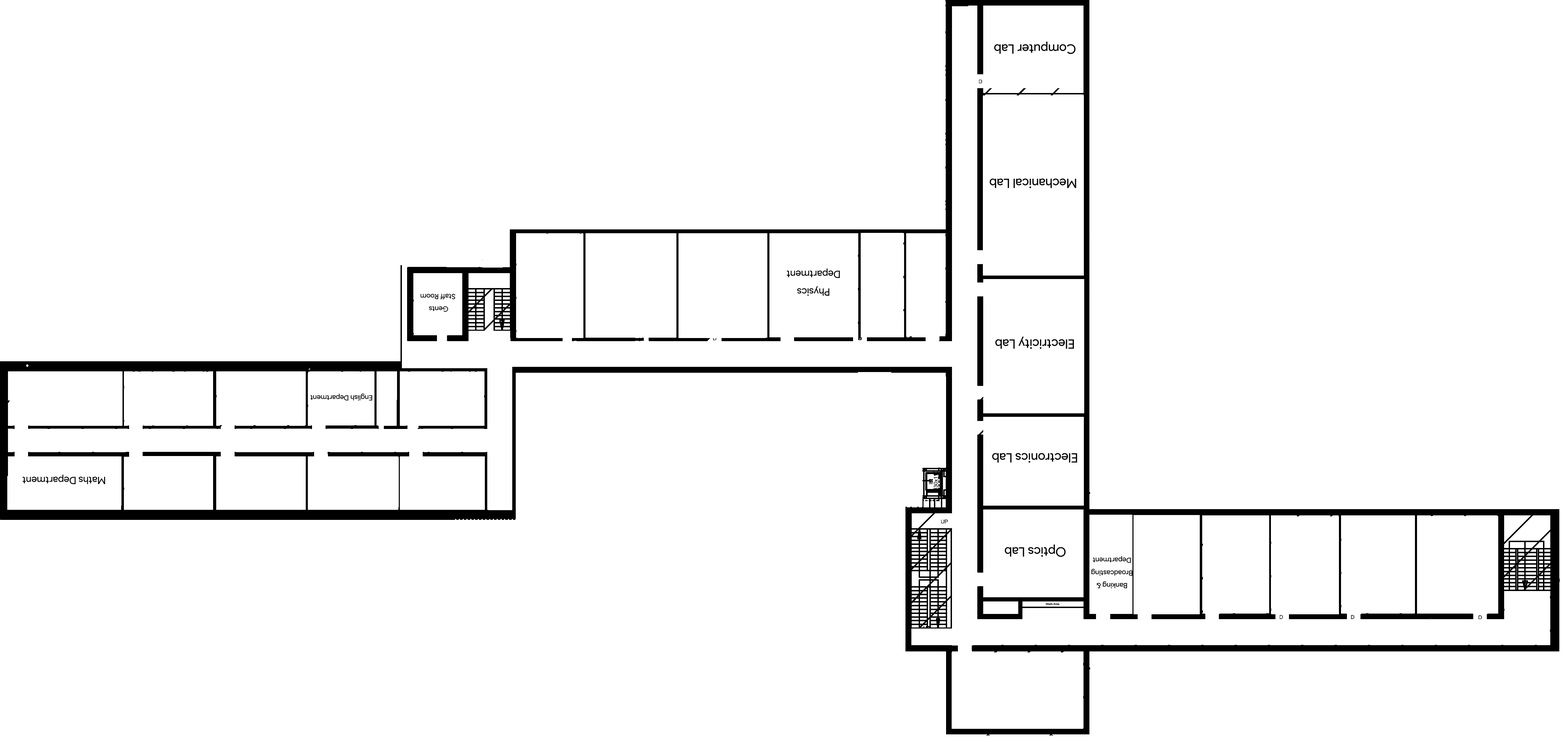
<style>
.page{position:relative;width:1568px;height:742px;background:#ffffff}
.page>*{position:absolute;margin:0}
.t1{font:13px "ProductSans-Regular";color:#000000}
.t2{font:10.1px "ProductSans-Regular";color:#000000}
.t3{font:7.2px "ProductSans-Regular";color:#000000}
.t4{font:2.9px "ProductSans-Regular";color:#000000}
</style>
<div class="page">
<p class="t1" style="left:994px;top:42px;width:82px;height:12px;rotate:180deg">Computer Lab</p>
<p class="t1" style="left:989px;top:178px;width:87px;height:10px;rotate:180deg">Mechanical Lab</p>
<p class="t2" style="left:787px;top:268px;width:53px;height:28px;text-align:center;rotate:-180deg">Physics<br>Department</p>
<p class="t3" style="left:420px;top:294px;width:35px;height:18px;text-align:center;rotate:180deg">Gents <br>Staff Room</p>
<p class="t1" style="left:995px;top:337px;width:79px;height:12px;rotate:-180deg">Electricity Lab</p>
<p class="t3" style="left:310px;top:394px;width:62px;height:7px;rotate:180deg">English Department</p>
<p class="t1" style="left:992px;top:453px;width:85px;height:10px;rotate:180deg">Electronics Lab</p>
<p class="t2" style="left:23px;top:474px;width:82px;height:10px;rotate:-180deg">Maths Department</p>
<p class="t1" style="left:1005px;top:545px;width:61px;height:12px;rotate:180deg">Optics Lab</p>
<p class="t3" style="left:1091px;top:556px;width:41px;height:33px;text-align:center;rotate:180deg">Banking &amp;<br>Broadcasting<br>Department</p>
<p class="t4" style="left:1046px;top:602px;width:13px;height:3px">Wash Area</p>
</div>
